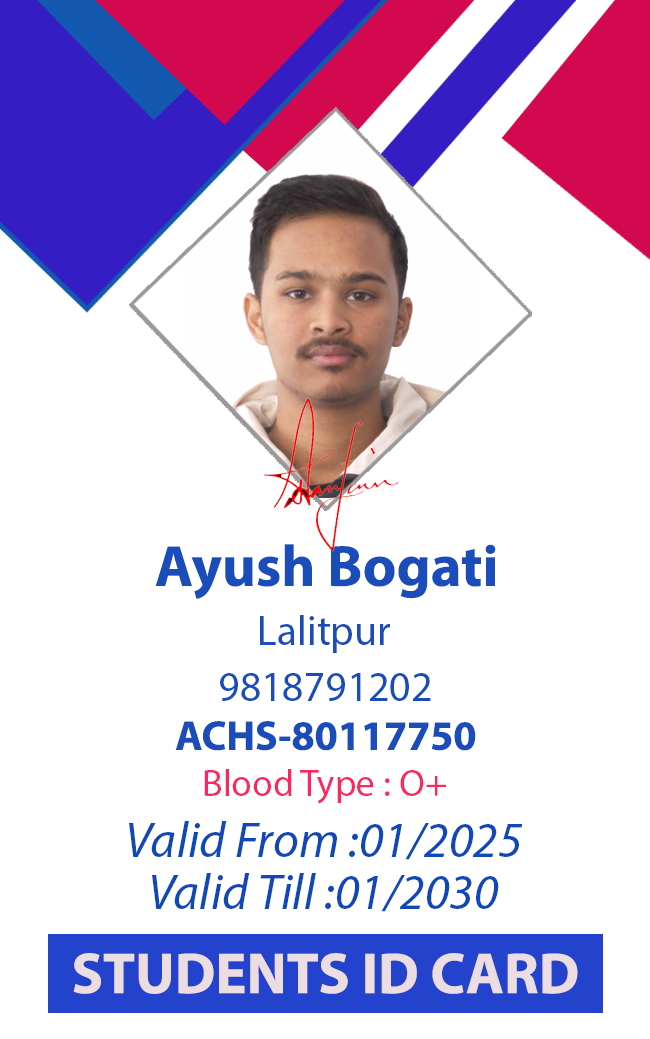
<style>
.page{position:relative;width:650px;height:1039px;background:#ffffff}
.page>*{position:absolute;margin:0}
.t1{font:58.3px "MyriadPro-Bold";color:#1a4dba}
.t2{font:41.7px "MyriadPro-Regular";color:#1a4dba}
.t3{font:41.7px "MyriadPro-Bold";color:#1a4dba}
.t4{font:37.5px "MyriadPro-Regular";color:#fa285f}
.t5{font:50px "MyriadPro-It";color:#1148b8}
.t6{font:58.3px "MyriadPro-Bold";color:#ecdde2}
</style>
<div class="page">
<p class="t1" style="left:155px;top:544px;width:341px;height:55px">Ayush Bogati</p>
<p class="t2" style="left:260px;top:615px;width:130px;height:38px">Lalitpur</p>
<p class="t2" style="left:220px;top:673px;width:211px;height:28px">9818791202</p>
<p class="t3" style="left:175px;top:721px;width:301px;height:30px">ACHS-80117750</p>
<p class="t4" style="left:204px;top:769px;width:242px;height:35px">Blood Type : O+</p>
<p class="t5" style="left:129px;top:821px;width:394px;height:39px">Valid From :01/2025</p>
<p class="t5" style="left:152px;top:873px;width:347px;height:39px">Valid Till :01/2030</p>
<p class="t6" style="left:73px;top:953px;width:505px;height:41px">STUDENTS ID CARD</p>
</div>
